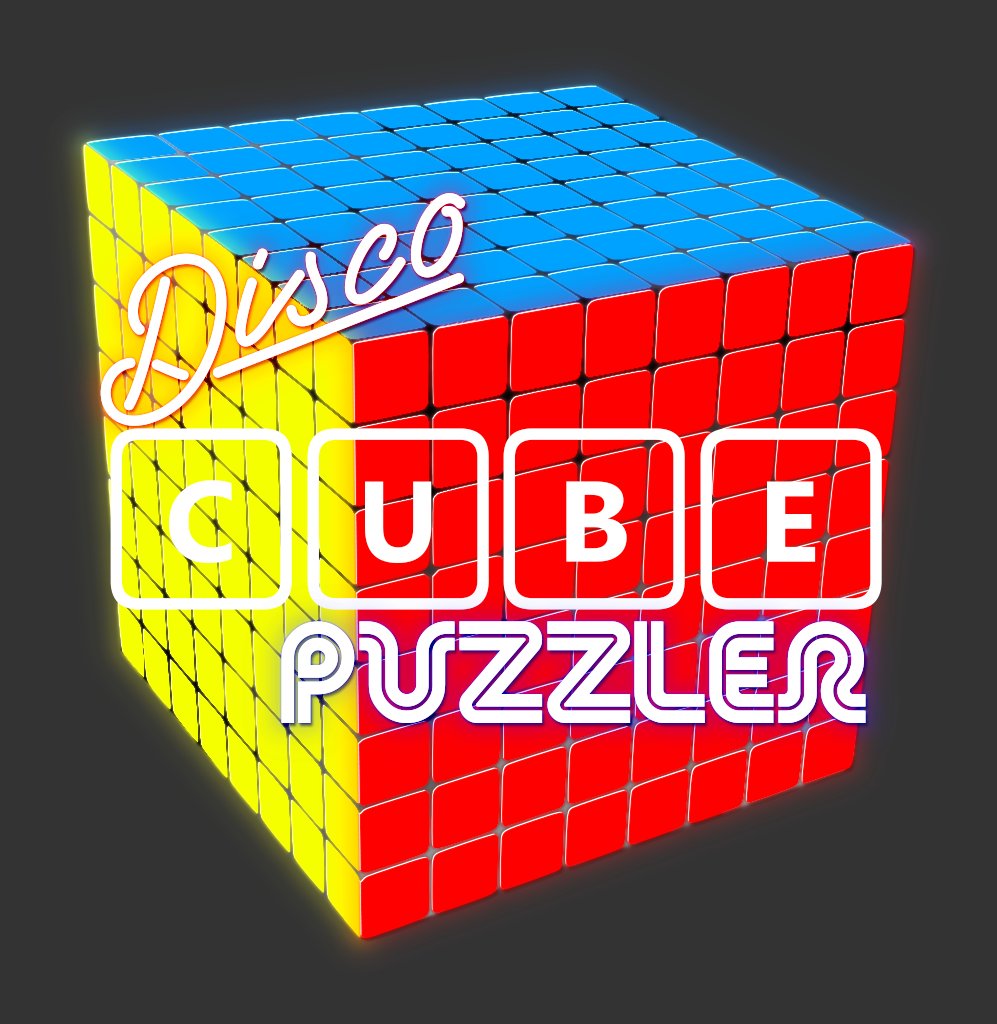
<style>
.page{position:relative;width:997px;height:1024px;background:#333333}
.page>*{position:absolute;margin:0}
.t1{font:194.4px "LasEnterPersonalUseOnly";color:#ffffff}
.t2{font:156.2px "SegoeKeycaps";color:#ffffff}
.t3{font:104px "RetroStereoWide";color:#ffffff}
</style>
<div class="page">
<p class="t1" style="left:100px;top:193px;width:366px;height:233px;rotate:-21deg">Disco</p>
<p class="t1" style="left:100px;top:193px;width:366px;height:233px;rotate:-21deg">Disco</p>
<p class="t2" style="left:110px;top:428px;width:772px;height:182px">CUBE</p>
<p class="t3" style="left:281px;top:621px;width:585px;height:102px">Puzzler</p>
<p class="t3" style="left:281px;top:621px;width:585px;height:102px">Puzzler</p>
</div>
